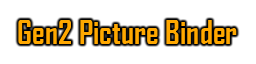
<style>
.page{position:relative;width:256px;height:64px;background:#ffffff}
.page>*{position:absolute;margin:0}
.t1{font:32px "AgencyFB-Bold";color:#ffa800}
</style>
<div class="page">
<p class="t1" style="left:18px;top:20px;width:219px;height:24px">Gen2 Picture Binder</p>
</div>
